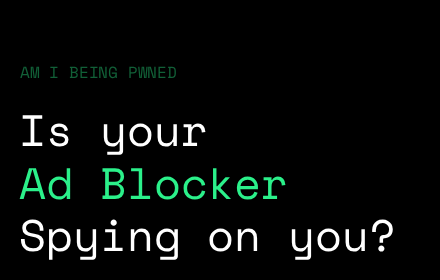
<style>
.page{position:relative;width:440px;height:280px;background:#000000}
.page>*{position:absolute;margin:0}
.t1{font:16px "SpaceMono-Regular";color:#116037}
.t2{font:44px "SpaceMono-Regular";color:#ffffff}
.t3{font:44px "SpaceMono-Regular";color:#2bf08a}
</style>
<div class="page">
<p class="t1" style="left:20px;top:66px;width:156px;height:13px">AM I BEING PWNED</p>
<p class="t2" style="left:19px;top:115px;width:374px;height:145px">Is your <br><span class="t3">Ad Blocker<br></span>Spying on you?</p>
</div>
